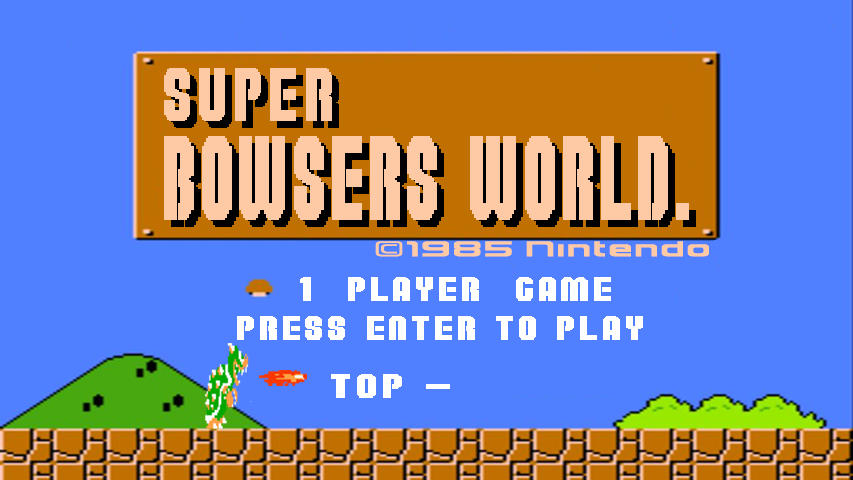
<style>
.page{position:relative;width:853px;height:480px;background:#5080ff}
.page>*{position:absolute;margin:0}
.t1{font:53.3px "SuperPlumberBrothers";letter-spacing:0.075em;color:#fecaa6;scale:1.4 1}
.t2{font:84px "SuperPlumberBrothers";letter-spacing:0.05em;color:#fecaa6}
.t3{font:82.1px "SuperPlumberBrothers";letter-spacing:0.05em;color:#fecaa6}
.t4{font:24px "NES2";letter-spacing:0.05em;color:#fecaa6;scale:1.75 1}
.t5{font:24px "SuperPlumberBrothers";letter-spacing:0.075em;color:#fffffe;scale:2 1}
.t6{font:24px "SuperPlumberBrothers";letter-spacing:0.075em;color:#fffffe;scale:2.25 1}
</style>
<div class="page">
<p class="t1" style="left:164px;top:68px;width:168px;height:53px">SUPER</p>
<p class="t2" style="left:164px;top:136px;width:525px;height:84px">BOWSERS WORLD<span class="t3">.</span></p>
<p class="t4" style="left:375px;top:241px;width:334px;height:16px">©1985 Nintendo</p>
<p class="t5" style="left:300px;top:277px;width:311px;height:24px">1  PLAYER  GAME</p>
<p class="t5" style="left:237px;top:316px;width:406px;height:24px">PRESS ENTER TO PLAY</p>
<p class="t6" style="left:331px;top:374px;width:119px;height:24px">TOP -</p>
</div>
